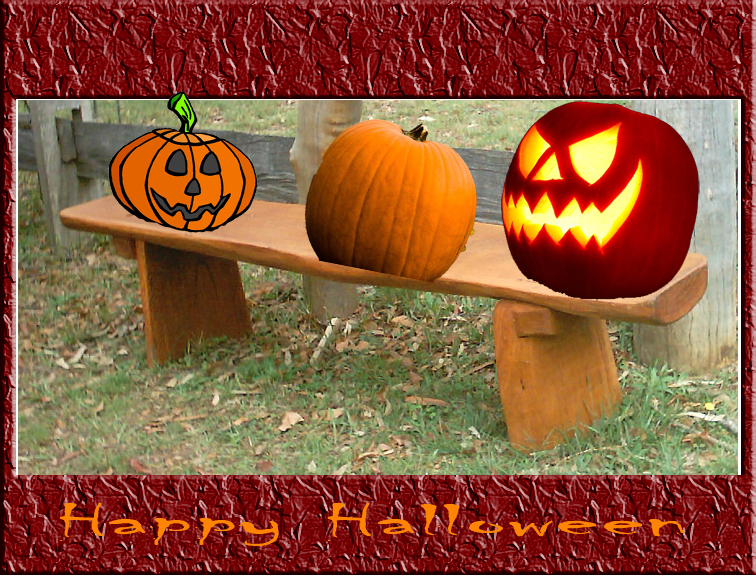
<style>
.page{position:relative;width:756px;height:576px}
.page>*{position:absolute;margin:0}
.t1{font:46.4px "Chiller-Regular";color:#fe8503;scale:2.86 1}
</style>
<div class="page">
<p class="t1" style="left:59px;top:503px;width:626px;height:43px">Happy Halloween</p>
</div>
